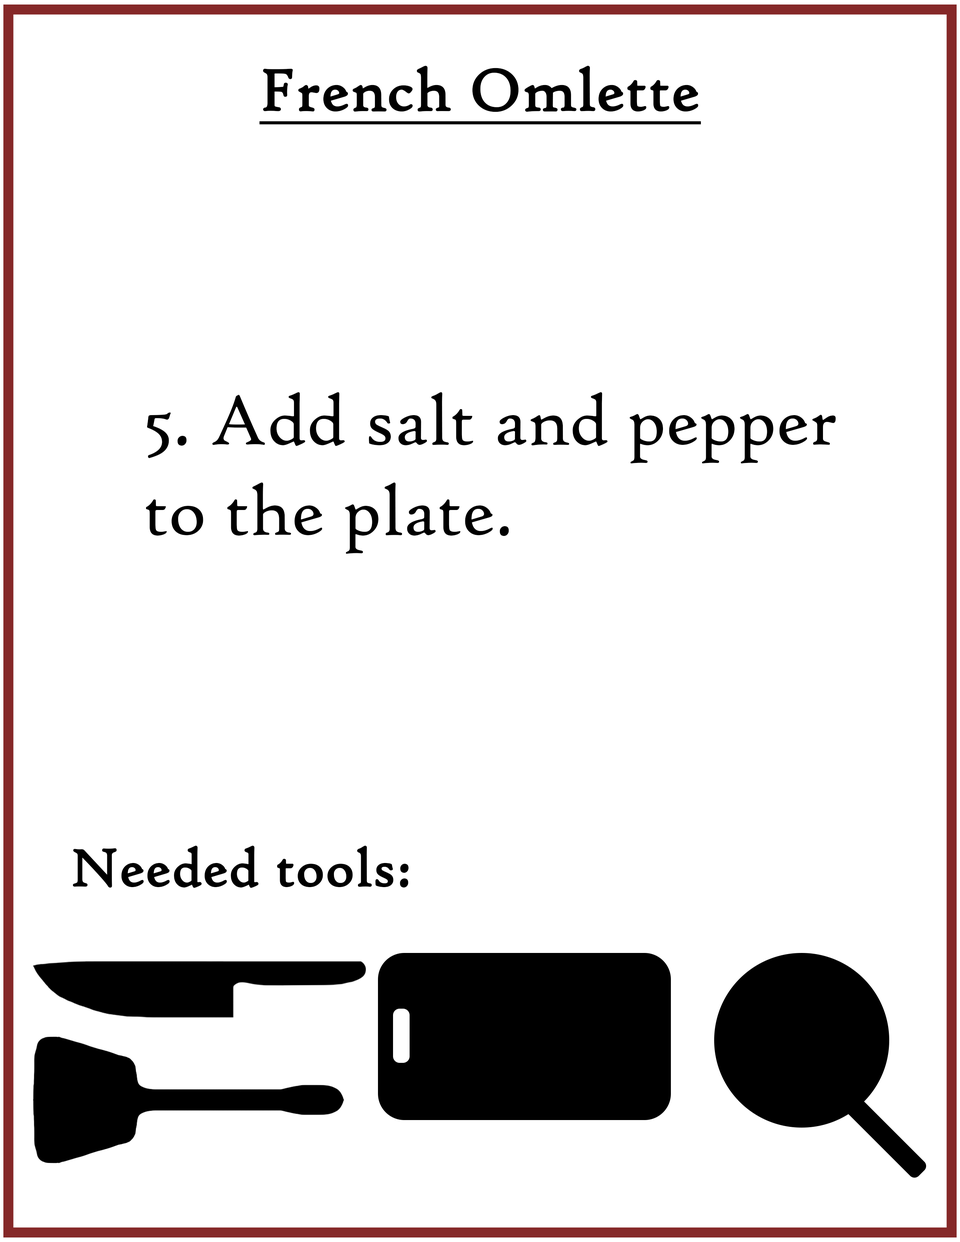
<style>
.page{position:relative;width:960px;height:1242px;background:#ffffff}
.page>*{position:absolute;margin:0}
.t1{font:62.7px "HighTowerText-Reg";color:#000000;font-weight:bold;text-decoration:underline}
.t2{font:75.3px "HighTowerText-Reg";color:#000000}
.t3{font:56.5px "HighTowerText-Reg";color:#000000;font-weight:bold}
</style>
<div class="page">
<p class="t1" style="left:259px;top:65px;width:442px;height:60px">French Omlette</p>
<p class="t2" style="left:146px;top:392px;width:690px;height:162px">5. Add salt and pepper to the plate.</p>
<p class="t3" style="left:73px;top:845px;width:336px;height:43px">Needed tools:</p>
</div>
